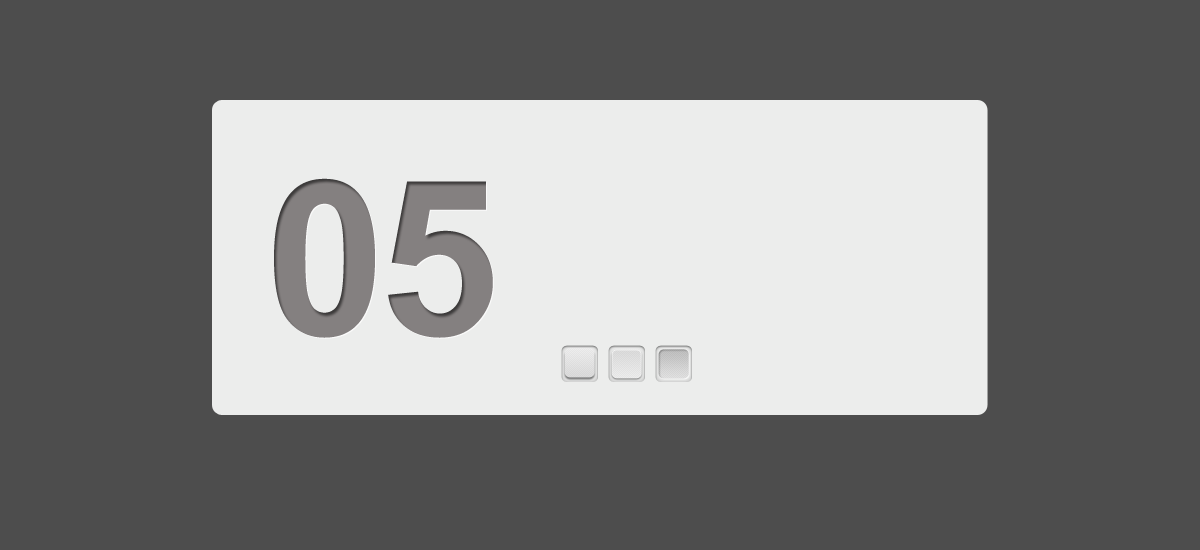
<style>
.page{position:relative;width:1200px;height:550px;background:#4d4d4d}
.page>*{position:absolute;margin:0}
.t1{font:216.9px "Arial-BoldMT";letter-spacing:-0.025em;color:#848080}
</style>
<div class="page">
<p class="t1" style="left:274px;top:178px;width:219px;height:160px">05</p>
</div>
